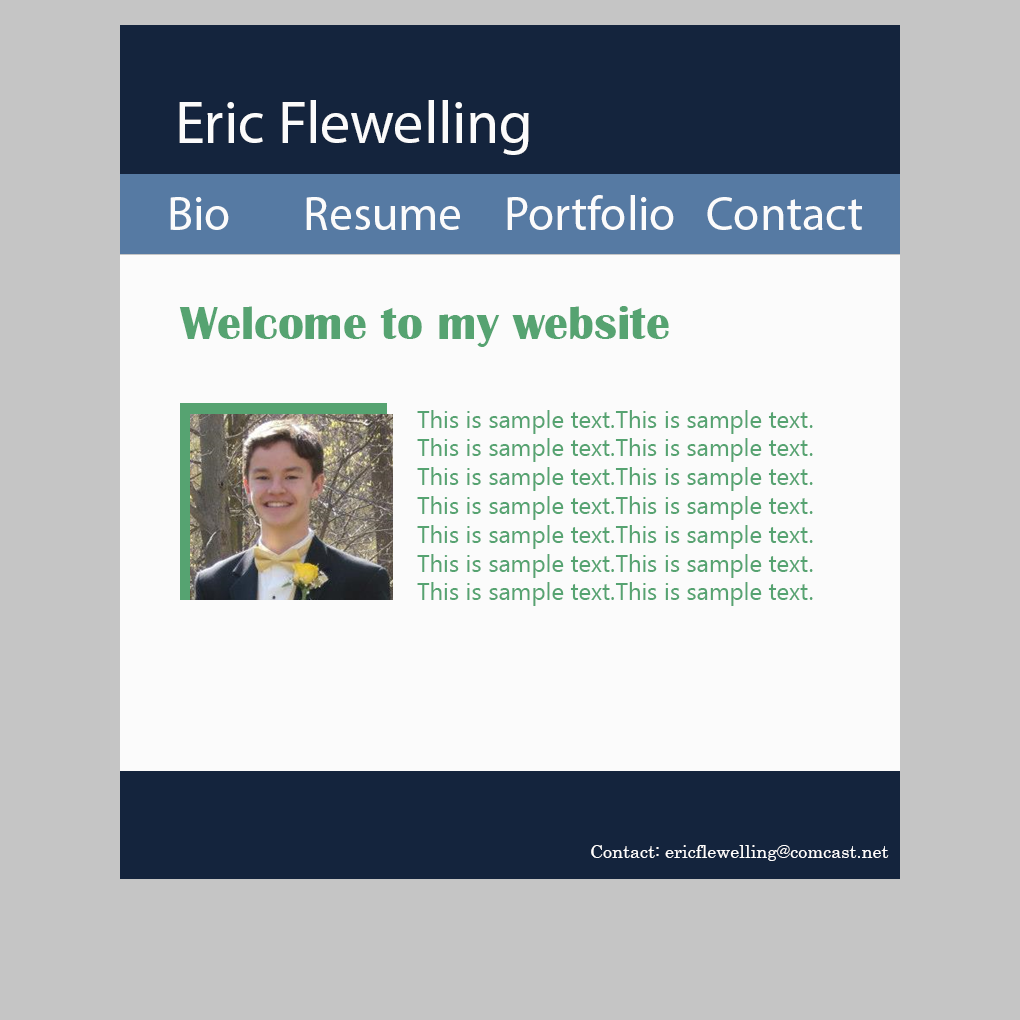
<style>
.page{position:relative;width:1020px;height:1020px;background:#c5c5c5}
.page>*{position:absolute;margin:0}
.t1{font:60px "MyriadPro-Regular";color:#fbfbfb}
.t2{font:48px "MyriadPro-Regular";color:#fbfbfb}
.t3{font:48px "BritannicBold";color:#56a371}
.t4{font:24px "NirmalaUI";color:#56a371}
.t5{font:18px "Century";color:#fffefe}
</style>
<div class="page">
<p class="t1" style="left:179px;top:100px;width:350px;height:55px">Eric Flewelling</p>
<p class="t2" style="left:170px;top:197px;width:59px;height:33px">Bio</p>
<p class="t2" style="left:306px;top:197px;width:154px;height:33px">Resume</p>
<p class="t2" style="left:507px;top:195px;width:167px;height:35px">Portfolio</p>
<p class="t2" style="left:707px;top:197px;width:155px;height:33px">Contact</p>
<p class="t3" style="left:179px;top:306px;width:490px;height:41px">Welcome to my website</p>
<p class="t4" style="left:417px;top:410px;width:396px;height:196px">This is sample text.This is sample text.<br>This is sample text.This is sample text.<br>This is sample text.This is sample text.<br>This is sample text.This is sample text.<br>This is sample text.This is sample text.<br>This is sample text.This is sample text.<br>This is sample text.This is sample text.</p>
<p class="t5" style="left:591px;top:845px;width:298px;height:16px">Contact: ericflewelling@comcast.net</p>
</div>
